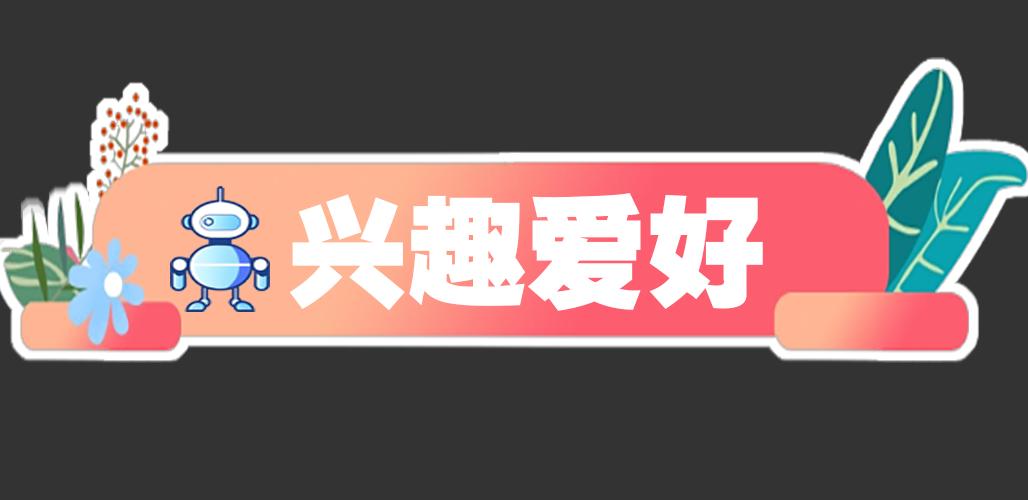
<style>
.page{position:relative;width:1028px;height:500px;background:#333333}
.page>*{position:absolute;margin:0}
.t1{font:119.4px "FZCCHJW--GB1-0";color:#ffffff}
</style>
<div class="page">
<p class="t1" style="left:289px;top:193px;width:474px;height:118px">兴趣爱好</p>
</div>
